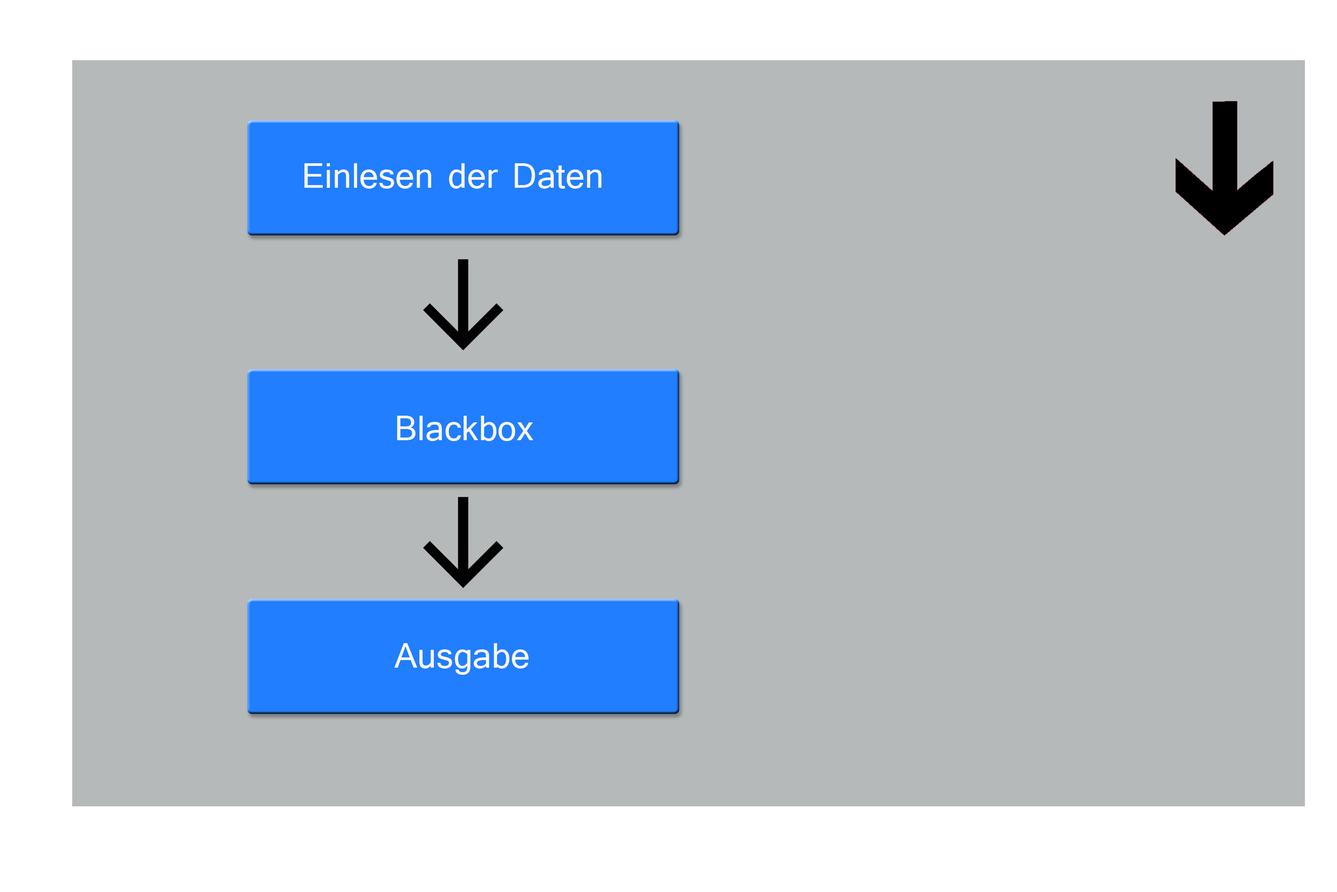
<style>
.page{position:relative;width:1337px;height:892px;background:#b6b9ba}
.page>*{position:absolute;margin:0}
.t1{font:37.2px "Shruti";color:#fcf6f6}
</style>
<div class="page">
<p class="t1" style="left:304px;top:163px;width:298px;height:26px">Einlesen der Daten</p>
<p class="t1" style="left:397px;top:415px;width:137px;height:26px">Blackbox</p>
<p class="t1" style="left:395px;top:643px;width:134px;height:31px">Ausgabe</p>
</div>
